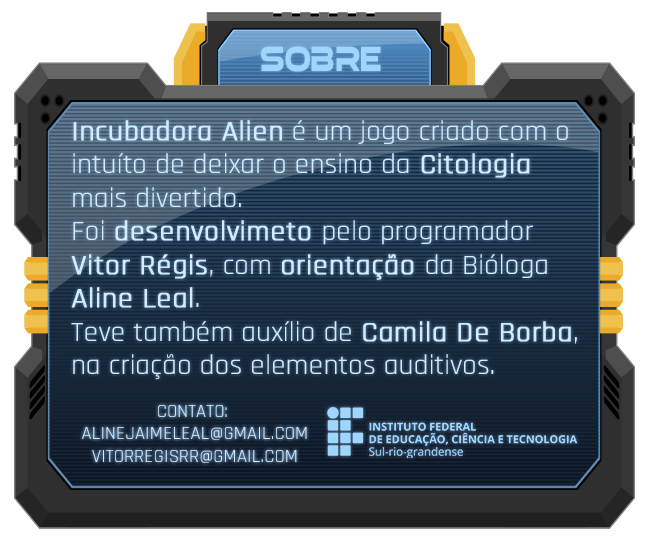
<style>
.page{position:relative;width:650px;height:545px}
.page>*{position:absolute;margin:0}
.t1{font:42.2px "elasisrg";letter-spacing:0.01em;color:#9ed6fd;scale:0.7 1}
.t2{font:27.9px "Rajdhani-Regular";color:#d0ecff;scale:1.06 1}
.t3{font:27.9px "Rajdhani-Regular";color:#d0ecff;font-weight:bold;scale:1.06 1}
.t4{font:18.8px "Rajdhani-Regular";color:#d0ecff}
</style>
<div class="page">
<p class="t1" style="left:261px;top:46px;width:120px;height:26px">SOBRE</p>
<p class="t2" style="left:71px;top:120px;width:506px;height:260px"><span class="t3">Incubadora Alien</span> é um jogo criado com o <br>intuíto de deixar o ensino da<span class="t3"> Citologia<br></span>mais divertido.<br>Foi <span class="t3">desenvolvimeto </span>pelo programador<br><span class="t3">Vitor Régis</span>, com <span class="t3">orientação </span>da Bióloga<br><span class="t3">Aline Leal</span>.<br>Teve também auxílio de <span class="t3">Camila De Borba</span>,<br>na criação dos elementos auditivos.</p>
<p class="t4" style="left:82px;top:405px;width:225px;height:58px;text-align:center">CONTATO: <br>ALINEJAIMELEAL@GMAIL.COM<br>VITORREGISRR@GMAIL.COM</p>
</div>
